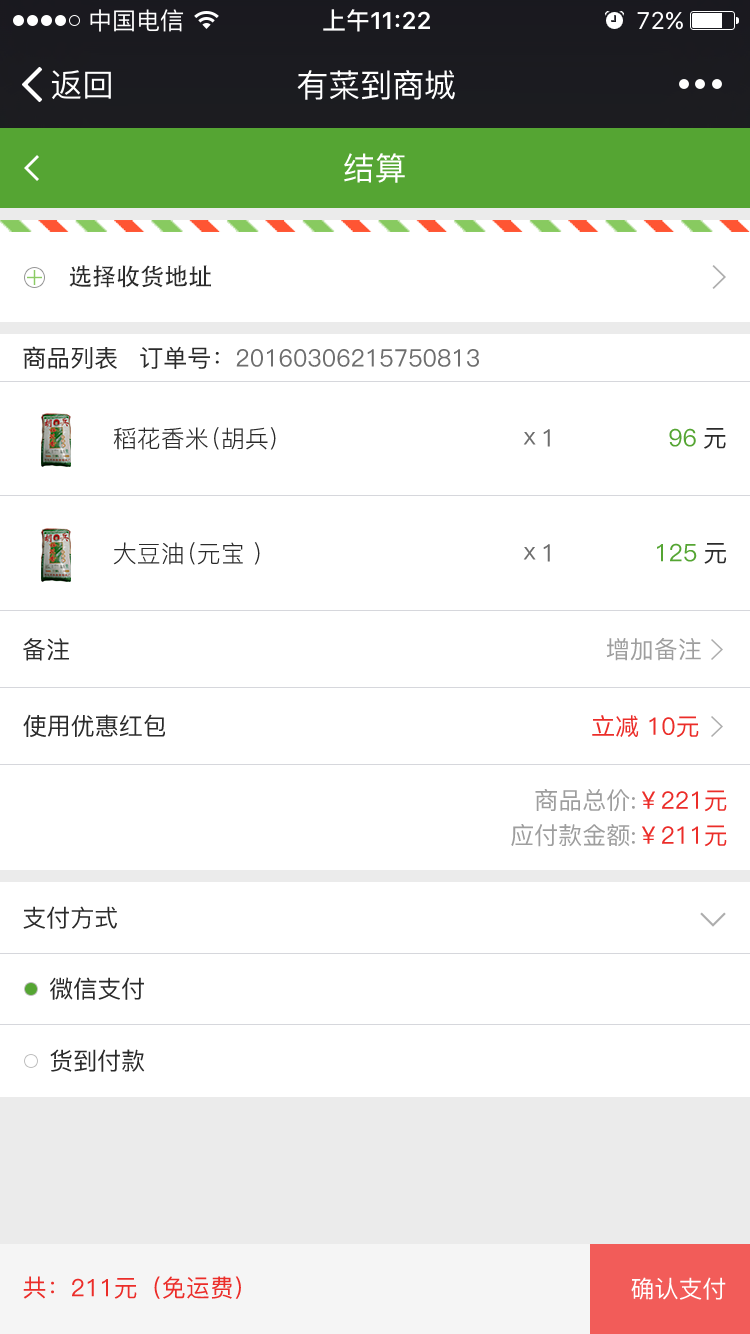
<style>
.page{position:relative;width:750px;height:1334px;background:#ffffff}
.page>*{position:absolute;margin:0}
.t1{font:32px "PingFang-SC-Medium";color:#ffffff}
.t2{font:24px "AdobeHeitiStd-Regular";color:#2b2b2b}
.t3{font:24px "PingFang-SC-Medium";color:#2b2b2b}
.t4{font:24px "PingFang-SC-Medium";color:#6e6e6e}
.t5{font:24px "PingFang-SC-Regular";color:#2b2b2b}
.t6{font:24px "PingFang-SC-Medium";color:#6d6d6d}
.t7{font:24px "PingFang-SC-Medium";color:#55a533}
.t8{font:24px "PingFang-SC-Medium";color:#9e9e9e}
.t9{font:24px "PingFang-SC-Medium";color:#eb2d29}
.t10{font:24px "PingFang-SC-Medium";color:#ffffff}
</style>
<div class="page">
<p class="t1" style="left:297px;top:70px;width:158px;height:30px">有菜到商城</p>
<p class="t1" style="left:344px;top:153px;width:61px;height:30px">结算</p>
<p class="t2" style="left:69px;top:265px;width:142px;height:23px">选择收货地址</p>
<p class="t3" style="left:23px;top:346px;width:94px;height:23px">商品列表</p>
<p class="t4" style="left:140px;top:346px;width:339px;height:23px"><span class="t3">订单号：</span>20160306215750813</p>
<p class="t5" style="left:113px;top:427px;width:163px;height:23px">稻花香米（胡兵）</p>
<p class="t6" style="left:523px;top:432px;width:13px;height:13px">x</p>
<p class="t6" style="left:543px;top:429px;width:7px;height:18px">1</p>
<p class="t7" style="left:669px;top:428px;width:57px;height:21px">96<span class="t3">元</span></p>
<p class="t5" style="left:113px;top:542px;width:147px;height:23px">大豆油（元宝 ）</p>
<p class="t6" style="left:543px;top:544px;width:7px;height:18px">1</p>
<p class="t7" style="left:657px;top:543px;width:69px;height:21px">125<span class="t3">元</span></p>
<p class="t6" style="left:523px;top:547px;width:13px;height:13px">x</p>
<p class="t3" style="left:23px;top:638px;width:46px;height:23px">备注</p>
<p class="t8" style="left:606px;top:637px;width:95px;height:24px">增加备注</p>
<p class="t3" style="left:23px;top:714px;width:142px;height:23px">使用优惠红包</p>
<p class="t9" style="left:592px;top:715px;width:107px;height:23px">立减 10元</p>
<p class="t8" style="left:535px;top:789px;width:192px;height:23px">商品总价:<span class="t9">￥221元</span></p>
<p class="t8" style="left:511px;top:824px;width:216px;height:23px">应付款金额:<span class="t9">￥211元</span></p>
<p class="t3" style="left:23px;top:906px;width:94px;height:23px">支付方式</p>
<p class="t3" style="left:50px;top:977px;width:94px;height:23px">微信支付</p>
<p class="t3" style="left:50px;top:1049px;width:95px;height:23px">货到付款</p>
<p class="t9" style="left:23px;top:1276px;width:218px;height:23px">共：211元（免运费）</p>
<p class="t10" style="left:631px;top:1277px;width:95px;height:23px">确认支付</p>
</div>
